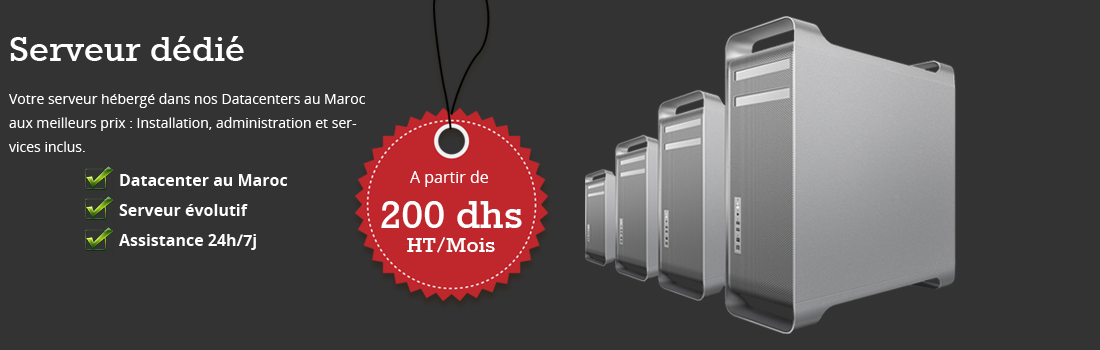
<style>
.page{position:relative;width:1100px;height:350px;background:#333333}
.page>*{position:absolute;margin:0}
.t1{font:40px "Rokkitt-Bold";color:#ffffff}
.t2{font:14px/24px "OpenSans";color:#ffffff}
.t3{font:16px "OpenSans-Bold";color:#ffffff}
.t4{font:16px "OpenSans";color:#ffffff}
.t5{font:44px "Rokkitt-Bold";color:#fefefe}
.t6{font:24px "Rokkitt-Bold";color:#fefefe}
</style>
<div class="page">
<p class="t1" style="left:10px;top:36px;width:234px;height:25px">Serveur dédié</p>
<p class="t2" style="left:9px;top:93px;width:356px;height:59px">Votre serveur hébergé dans nos Datacenters au Maroc aux meilleurs prix : Installation, administration et services inclus.</p>
<p class="t3" style="left:120px;top:174px;width:168px;height:12px">Datacenter au Maroc</p>
<p class="t4" style="left:410px;top:170px;width:78px;height:17px">A partir de</p>
<p class="t3" style="left:119px;top:204px;width:129px;height:12px">Serveur évolutif</p>
<p class="t5" style="left:381px;top:201px;width:141px;height:52px">200 dhs <span class="t6">HT/Mois</span></p>
<p class="t3" style="left:119px;top:234px;width:137px;height:16px">Assistance 24h/7j</p>
</div>
